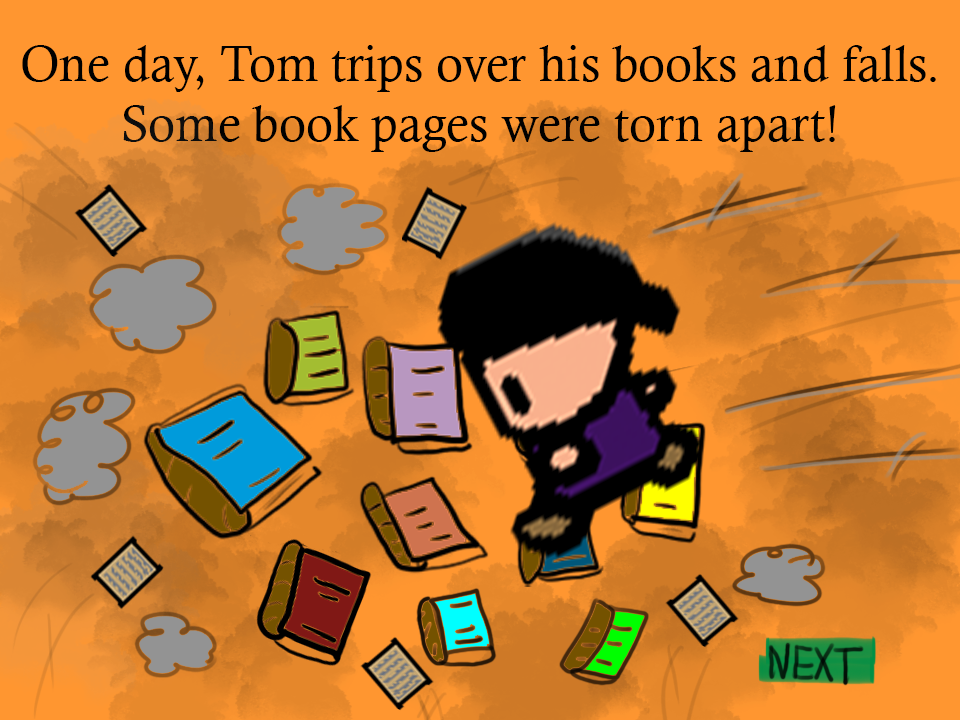
<style>
.page{position:relative;width:960px;height:720px;background:#ff9630}
.page>*{position:absolute;margin:0}
.t1{font:50px "CalistoMT";color:#000000}
</style>
<div class="page">
<p class="t1" style="left:22px;top:45px;width:914px;height:107px;text-align:center">One day, Tom trips over his books and falls.<br>Some book pages were torn apart!</p>
</div>
